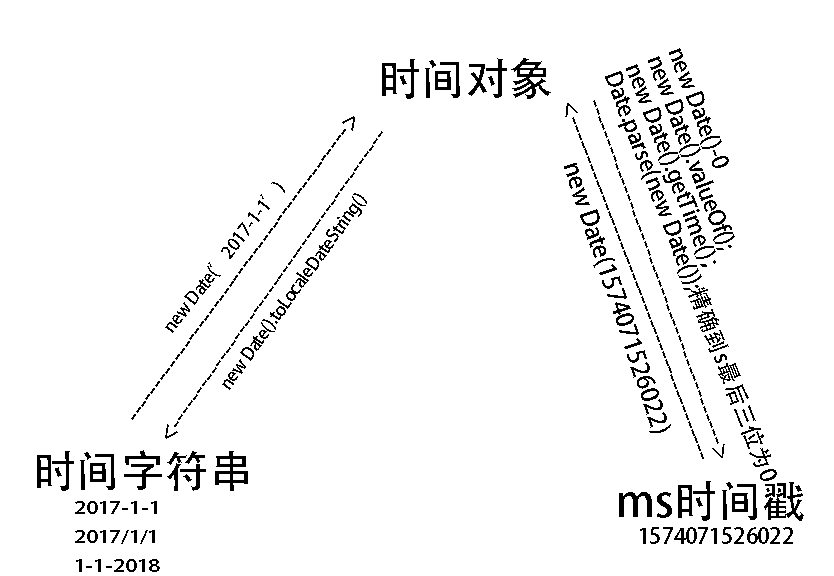
<style>
.page{position:relative;width:834px;height:576px;background:#ffffff}
.page>*{position:absolute;margin:0}
.t1{font:22.6px/22.6px "AdobeHeitiStd-Regular";color:#000000}
.t2{font:43.4px "AdobeHeitiStd-Regular";color:#000000}
.t3{font:23.1px "AdobeHeitiStd-Regular";color:#000000}
.t4{font:24.2px "AdobeHeitiStd-Regular";color:#000000}
.t5{font:17.5px "AdobeHeitiStd-Regular";color:#000000}
.t6{font:16.6px "AdobeHeitiStd-Regular";color:#000000;scale:1.33 1}
.t7{font:22.1px "AdobeHeitiStd-Regular";color:#000000}
</style>
<div class="page">
<p class="t1" style="left:605px;top:48px;width:172px;height:433px;rotate:69deg">new Date()-0 <br>new Date().valueOf();<br>new Date().getTime()；<br>Date.parse(new Date());精确到s最后三位为0</p>
<p class="t2" style="left:382px;top:58px;width:169px;height:41px">时间对象</p>
<p class="t3" style="left:131px;top:116px;width:224px;height:304px;rotate:-54deg">--------------------------------------------&gt;</p>
<p class="t3" style="left:165px;top:131px;width:218px;height:308px;rotate:125deg">--------------------------------------------&gt;</p>
<p class="t4" style="left:564px;top:163px;width:107px;height:270px;rotate:71deg">new Date(1574071526022)</p>
<p class="t5" style="left:165px;top:182px;width:120px;height:151px;rotate:-52deg">new Date(’2017-1-1’)</p>
<p class="t5" style="left:222px;top:193px;width:145px;height:197px;rotate:-54deg">new Date().toLocaleDateString()</p>
<p class="t2" style="left:37px;top:450px;width:211px;height:41px">时间字符串</p>
<p class="t2" style="left:619px;top:481px;width:185px;height:40px">ms时间戳</p>
<p class="t6" style="left:75px;top:501px;width:85px;height:71px">2017-1-1<br>2017/1/1<br>1-1-2018</p>
<p class="t7" style="left:640px;top:527px;width:153px;height:17px">1574071526022</p>
</div>
